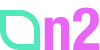
<style>
.page{position:relative;width:100px;height:50px;background:#ffffff}
.page>*{position:absolute;margin:0}
.t1{font:60px "HelveticaNeueLTStd-BdCn";color:#e866f4}
</style>
<div class="page">
<p class="t1" style="left:44px;top:7px;width:56px;height:43px">n2</p>
</div>
